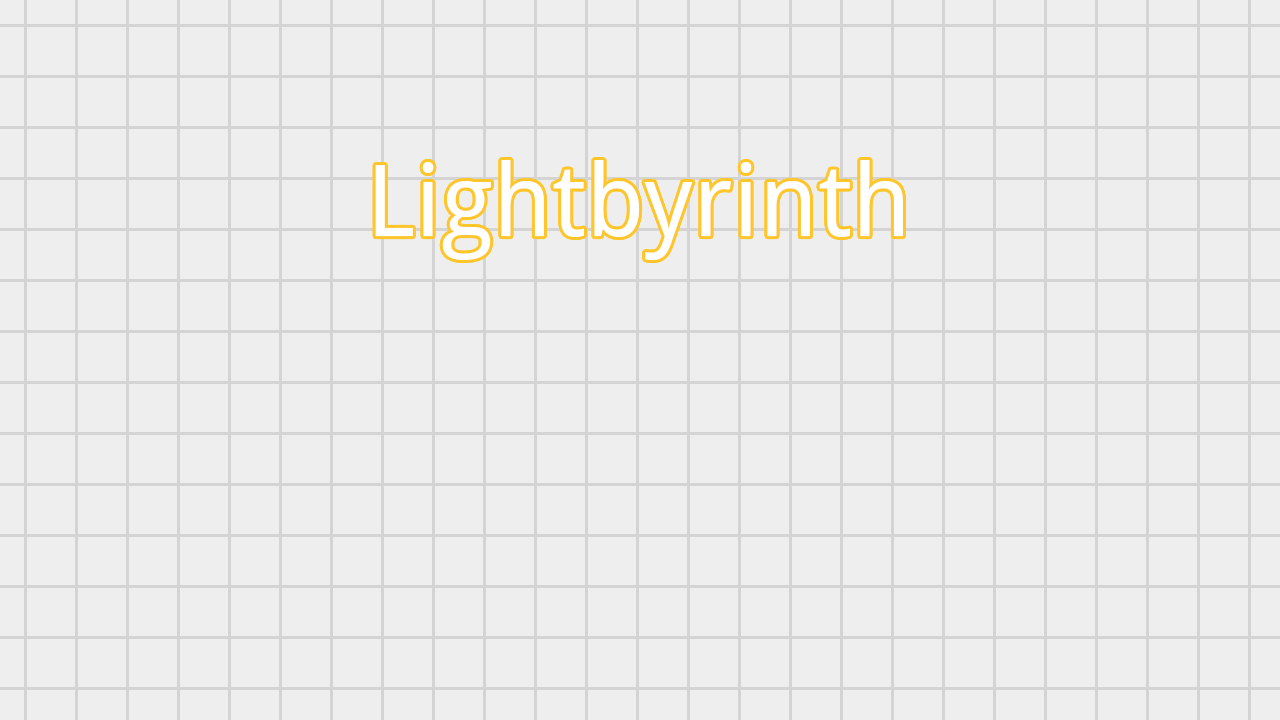
<style>
.page{position:relative;width:1280px;height:720px;background:#eeeeee}
.page>*{position:absolute;margin:0}
.t1{font:100px "DroidSans";color:#ffffff}
</style>
<div class="page">
<p class="t1" style="left:375px;top:160px;width:528px;height:100px">Lightbyrinth</p>
</div>
